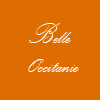
<style>
.page{position:relative;width:100px;height:100px;background:#de6c00}
.page>*{position:absolute;margin:0}
.t1{font:24px "PalaceScriptMT";color:#ffffff}
.t2{font:36px "PalaceScriptMT";color:#ffffff}
</style>
<div class="page">
<p class="t1" style="left:28px;top:23px;width:51px;height:49px"><span class="t2">B</span>elle <br>Occitanie</p>
</div>
